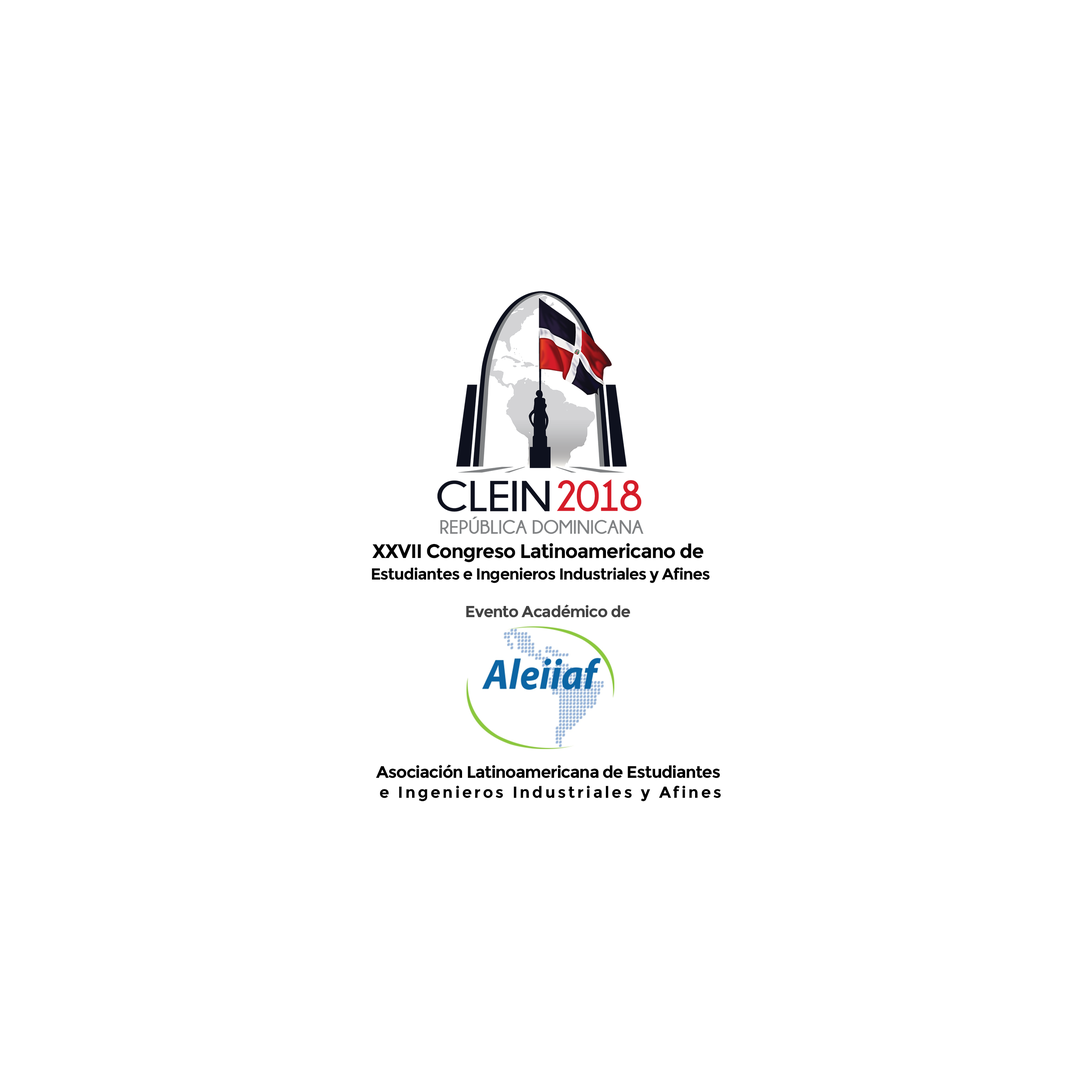
<style>
.page{position:relative;width:1092px;height:1092px;background:#ffffff}
.page>*{position:absolute;margin:0}
.t1{font:16px/21.9px "Montserrat-Bold";letter-spacing:-0.04em;color:#010101}
.t2{font:19.6px/21.9px "Montserrat-Bold";letter-spacing:-0.04em;color:#010101}
.t3{font:16px "Montserrat-Bold";letter-spacing:-0.04em;color:#434343}
.t4{font:16.8px/20px "Montserrat-Bold";letter-spacing:-0.04em;color:#000000}
.t5{font:16px/20px "Montserrat-Bold";letter-spacing:0.14em;color:#000000}
</style>
<div class="page">
<p class="t1" style="left:372px;top:543px;width:337px;height:40px;text-align:center"><span class="t2">XXVII Congreso Latinoamericano de <br></span>Estudiantes e Ingenieros Industriales y Afines</p>
<p class="t3" style="left:466px;top:604px;width:164px;height:14px">Evento Académico de</p>
<p class="t4" style="left:376px;top:765px;width:345px;height:36px;text-align:center">Asociación Latinoamericana de Estudiantes <br><span class="t5">e Ingenieros Industriales y Afines</span></p>
</div>
